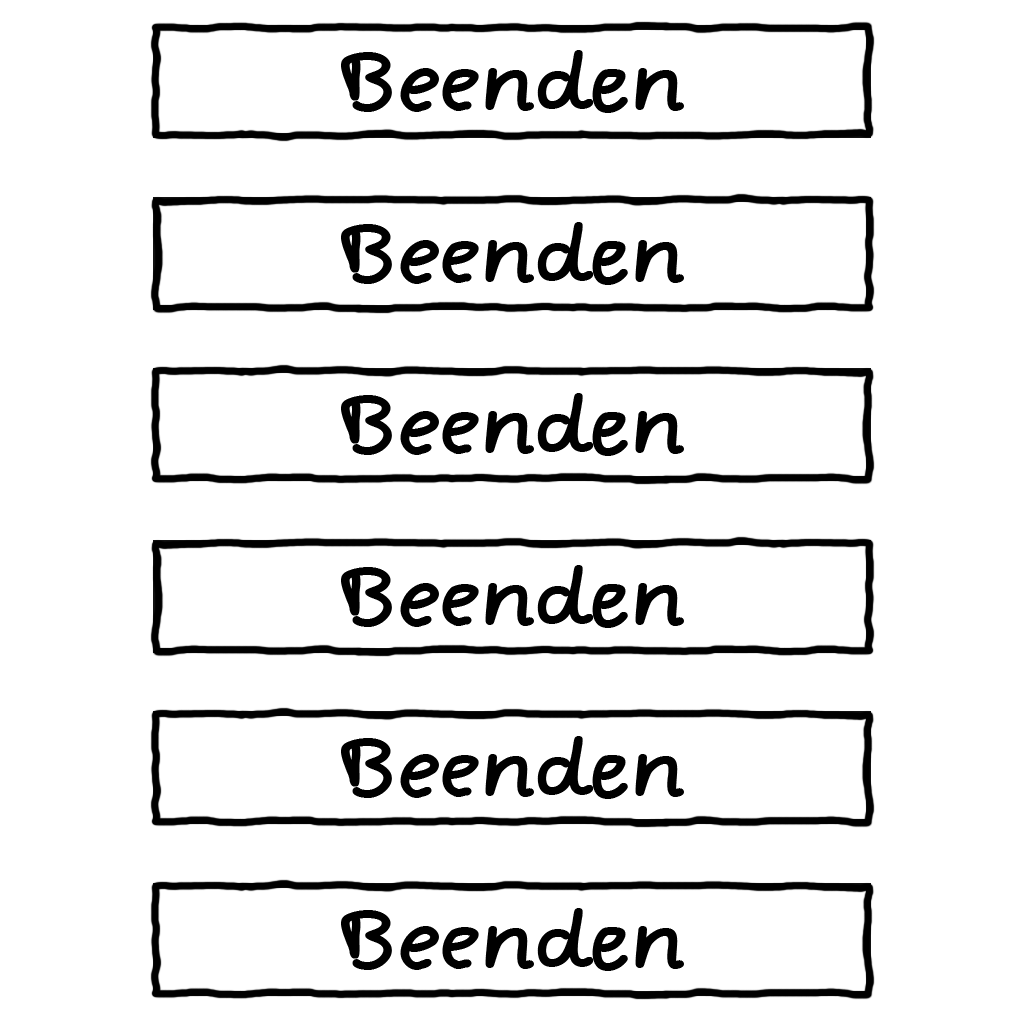
<style>
.page{position:relative;width:1024px;height:1024px;background:#ffffff}
.page>*{position:absolute;margin:0}
.t1{font:78.1px "ComicJensFreePro";color:#000000;scale:1.13 1}
</style>
<div class="page">
<p class="t1" style="left:341px;top:50px;width:343px;height:63px">Beenden</p>
<p class="t1" style="left:341px;top:222px;width:343px;height:63px">Beenden</p>
<p class="t1" style="left:341px;top:393px;width:343px;height:63px">Beenden</p>
<p class="t1" style="left:341px;top:565px;width:343px;height:63px">Beenden</p>
<p class="t1" style="left:341px;top:736px;width:343px;height:63px">Beenden</p>
<p class="t1" style="left:341px;top:908px;width:343px;height:63px">Beenden</p>
</div>
